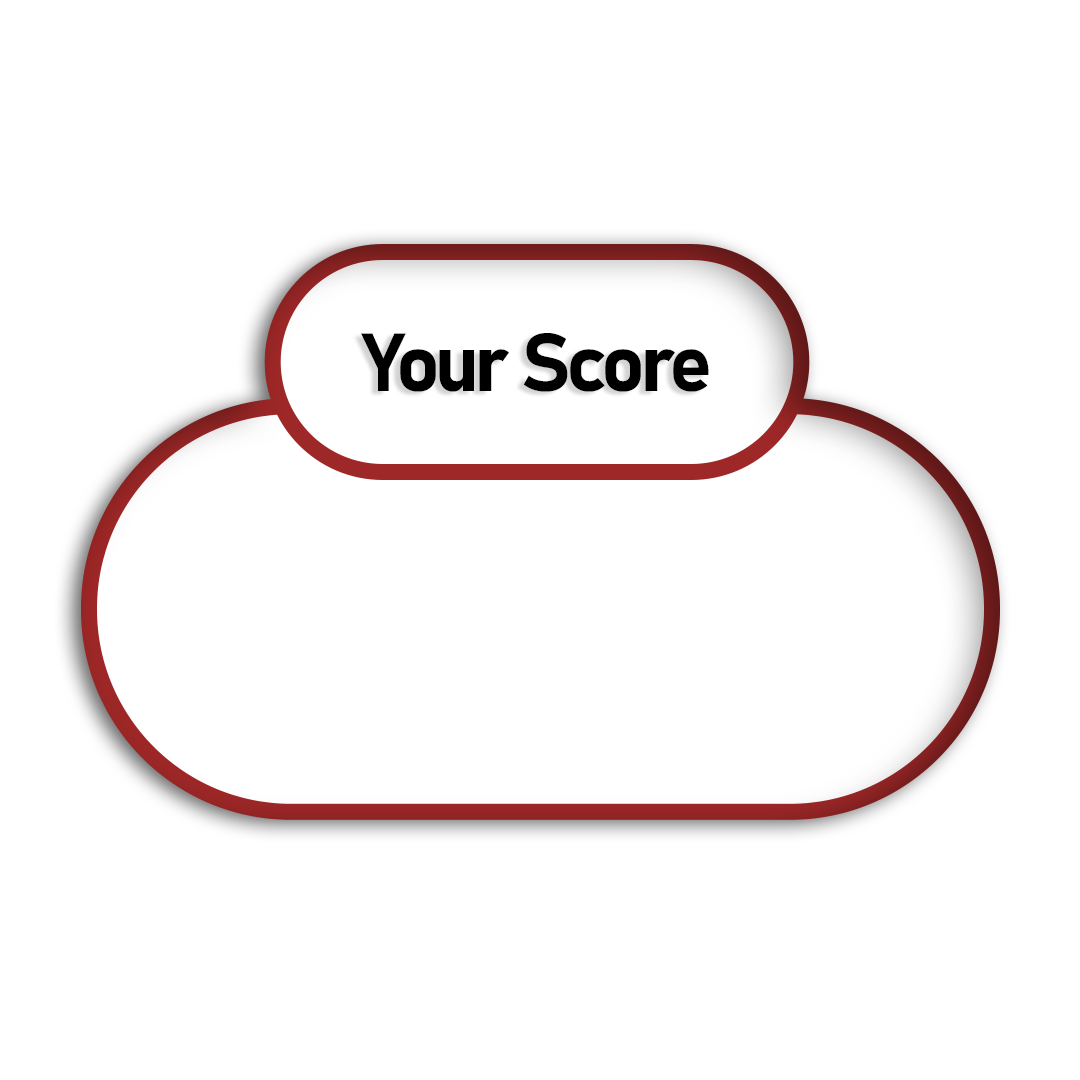
<style>
.page{position:relative;width:1080px;height:1080px;background:#ffffff}
.page>*{position:absolute;margin:0}
.t1{font:81px "Bahnschrift-Bold";letter-spacing:-0.06em;color:#000000}
</style>
<div class="page">
<p class="t1" style="left:361px;top:333px;width:348px;height:59px">Your Score</p>
</div>
